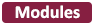
<style>
.page{position:relative;width:94px;height:25px;background:#861f41}
.page>*{position:absolute;margin:0}
.t1{font:18px "Calibri-Bold";color:#ffffff}
</style>
<div class="page">
<p class="t1" style="left:15px;top:5px;width:65px;height:14px">Modules</p>
</div>
